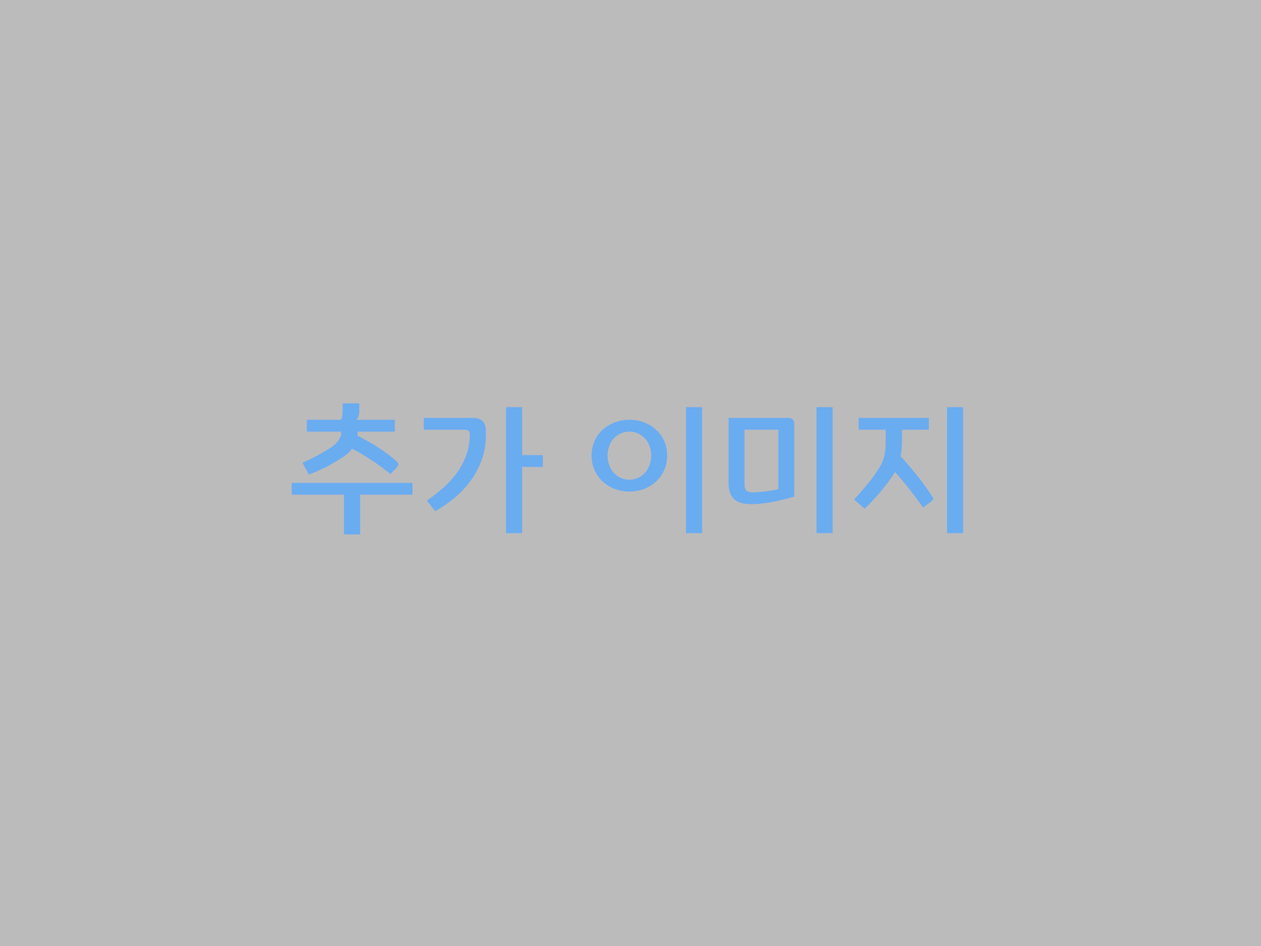
<style>
.page{position:relative;width:1261px;height:946px;background:#bbbbbb}
.page>*{position:absolute;margin:0}
.t1{font:146.8px "KBFGDisplay-Medium";letter-spacing:-0.02em;color:#6aacf0;font-weight:bold}
</style>
<div class="page">
<p class="t1" style="left:291px;top:403px;width:672px;height:132px">추가 이미지</p>
</div>
